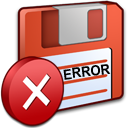
<style>
.page{position:relative;width:128px;height:128px;background:#ffffff}
.page>*{position:absolute;margin:0}
.t1{font:14px "Arial-BoldMT";color:#010101;scale:0.93 1}
</style>
<div class="page">
<p class="t1" style="left:63px;top:64px;width:48px;height:16px;rotate:-8deg">ERROR</p>
</div>
